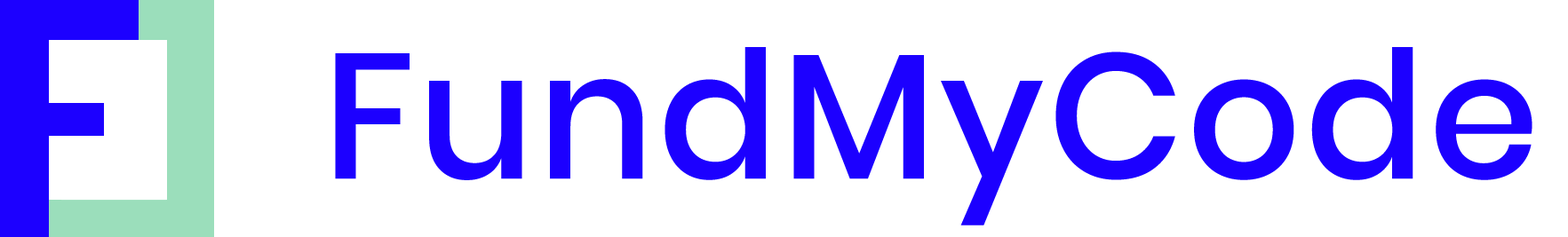
<style>
.page{position:relative;width:1568px;height:237px;background:#ffffff}
.page>*{position:absolute;margin:0}
.t1{font:177.7px "Poppins-Medium";letter-spacing:0.022em;color:#1c00ff}
</style>
<div class="page">
<p class="t1" style="left:335px;top:47px;width:1197px;height:179px">FundMyCode</p>
</div>
